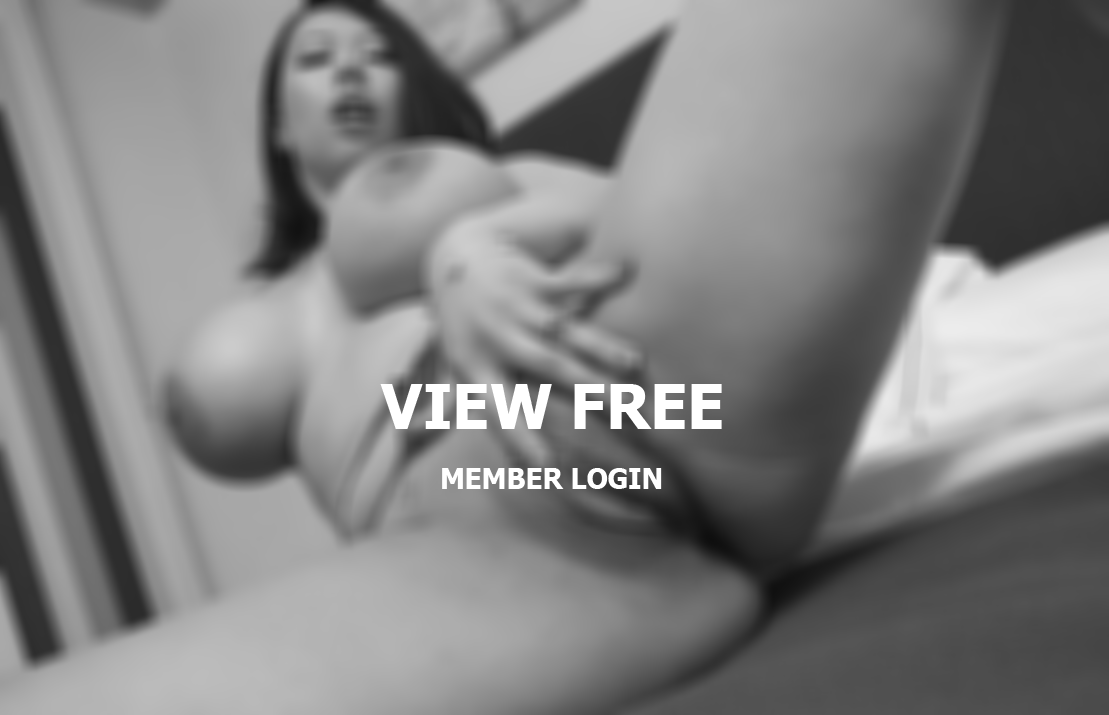
<style>
.page{position:relative;width:1109px;height:715px}
.page>*{position:absolute;margin:0}
.t1{font:61.6px "Tahoma-Bold";color:#ffffff}
.t2{font:29px "Tahoma-Bold";color:#ffffff;scale:0.95 1}
</style>
<div class="page">
<p class="t1" style="left:380px;top:384px;width:342px;height:45px">VIEW FREE</p>
<p class="t2" style="left:442px;top:468px;width:220px;height:21px">MEMBER LOGIN</p>
</div>
